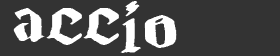
<style>
.page{position:relative;width:280px;height:56px;background:#333333}
.page>*{position:absolute;margin:0}
.t1{font:58.6px "ParryHotter";color:#ffffff;scale:1.56 1}
</style>
<div class="page">
<p class="t1" style="left:13px;top:1px;width:164px;height:52px">accio</p>
</div>
